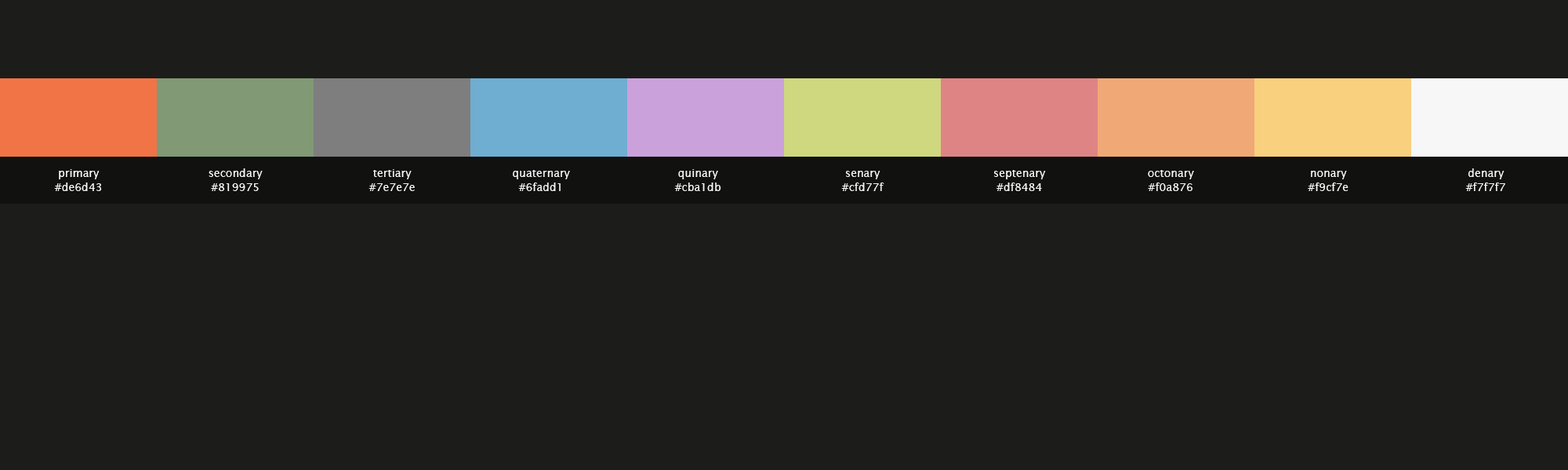
<style>
.page{position:relative;width:1568px;height:470px;background:#1c1d1a}
.page>*{position:absolute;margin:0}
.t1{font:11px/14.1px "LucidaSans";color:#f7f7f7}
</style>
<div class="page">
<p class="t1" style="left:54px;top:169px;width:48px;height:22px;text-align:center">primary<br>#de6d43</p>
<p class="t1" style="left:209px;top:169px;width:54px;height:22px;text-align:center">secondary<br>#819975</p>
<p class="t1" style="left:368px;top:169px;width:47px;height:22px;text-align:center">tertiary<br>#7e7e7e</p>
<p class="t1" style="left:513px;top:170px;width:57px;height:21px;text-align:center">quaternary<br>#6fadd1</p>
<p class="t1" style="left:674px;top:169px;width:47px;height:22px;text-align:center">quinary<br>#cba1db</p>
<p class="t1" style="left:841px;top:171px;width:43px;height:20px;text-align:center">senary<br>#cfd77f</p>
<p class="t1" style="left:994px;top:170px;width:52px;height:21px;text-align:center">septenary<br>#df8484</p>
<p class="t1" style="left:1148px;top:170px;width:46px;height:21px;text-align:center">octonary<br>#f0a876</p>
<p class="t1" style="left:1308px;top:171px;width:40px;height:20px;text-align:center">nonary<br>#f9cf7e</p>
<p class="t1" style="left:1465px;top:169px;width:40px;height:22px;text-align:center">denary<br>#f7f7f7</p>
</div>
